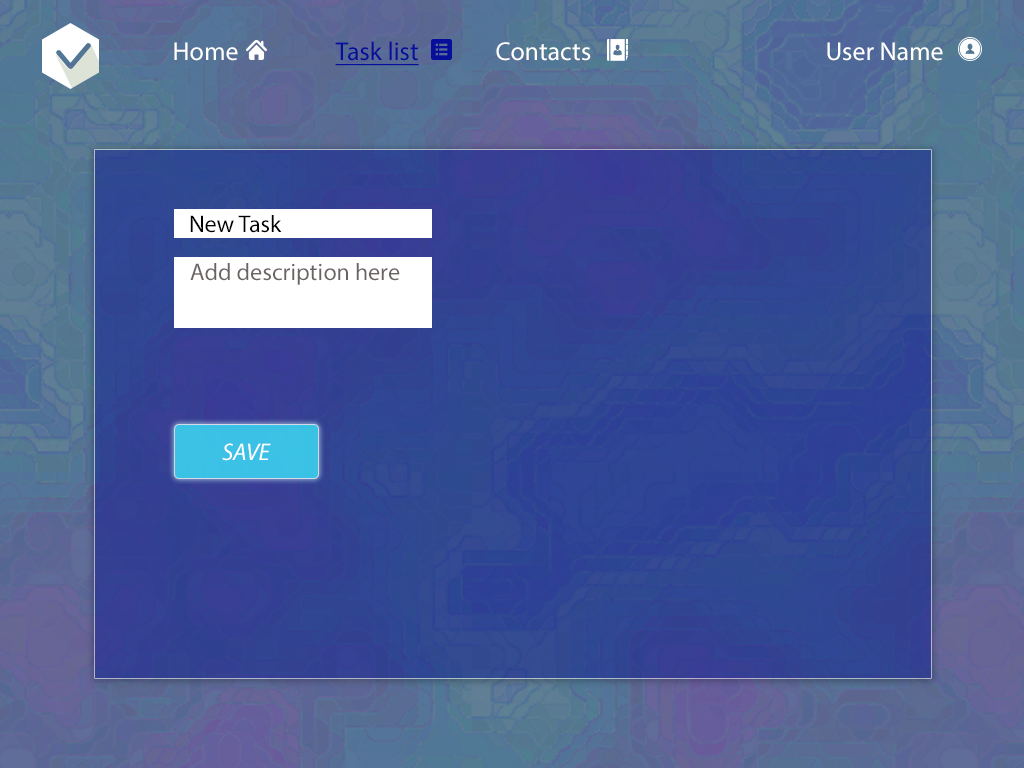
<style>
.page{position:relative;width:1024px;height:768px}
.page>*{position:absolute;margin:0}
.t1{font:26px "MyriadPro-Regular";color:#060e9a;text-decoration:underline}
.t2{font:26px "MyriadPro-Regular";color:#ffffff}
.t3{font:24px "MyriadPro-Regular";color:#000000}
.t4{font:24px "MyriadPro-Regular";color:#6c6363}
.t5{font:24px "MyriadPro-It";color:#ffffff}
</style>
<div class="page">
<p class="t1" style="left:335px;top:41px;width:84px;height:25px">Task list</p>
<p class="t2" style="left:174px;top:42px;width:64px;height:19px">Home</p>
<p class="t2" style="left:496px;top:42px;width:95px;height:19px">Contacts</p>
<p class="t2" style="left:827px;top:42px;width:116px;height:19px">User Name</p>
<p class="t3" style="left:190px;top:215px;width:92px;height:18px">New Task</p>
<p class="t4" style="left:190px;top:263px;width:210px;height:22px">Add description here</p>
<p class="t5" style="left:222px;top:443px;width:49px;height:18px">SAVE</p>
</div>
